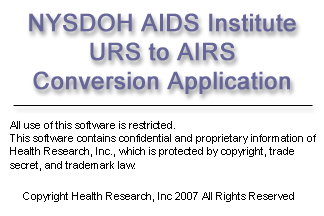
<style>
.page{position:relative;width:324px;height:216px;background:#ffffff}
.page>*{position:absolute;margin:0}
.t1{font:24px "ArialMT";color:#666699;font-weight:bold}
.t2{font:11px "ArialMT";color:#000000}
</style>
<div class="page">
<p class="t1" style="left:29px;top:13px;width:267px;height:81px;text-align:center">NYSDOH AIDS Institute<br>URS to AIRS<br>Conversion Application</p>
<p class="t2" style="left:10px;top:121px;width:306px;height:50px">All use of this software is restricted.<br>This software contains confidential and proprietary information of<br>Health Research, Inc., which is protected by copyright, trade <br>secret, and trademark law.</p>
<p class="t2" style="left:23px;top:192px;width:271px;height:10px">Copyright Health Research, Inc 2007 All Rights Reserved</p>
</div>
